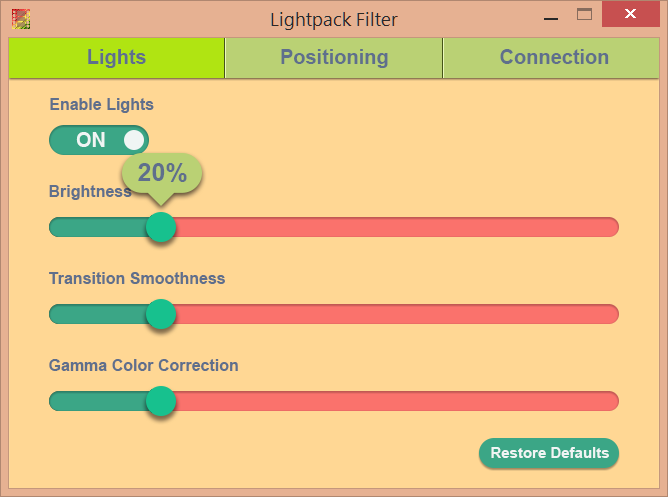
<style>
.page{position:relative;width:668px;height:497px;background:#ffd794}
.page>*{position:absolute;margin:0}
.t1{font:20px "Arial-BoldMT";color:#5f6f8c}
.t2{font:16px "Arial-BoldMT";color:#5f6f8c}
.t3{font:20px "Arial-BoldMT";color:#f0f5f4}
.t4{font:25px "Arial-BoldMT";color:#5f6f8c}
.t5{font:15px "Arial-BoldMT";color:#f0f5f4}
</style>
<div class="page">
<p class="t1" style="left:88px;top:49px;width:58px;height:19px">Lights</p>
<p class="t1" style="left:281px;top:49px;width:107px;height:19px">Positioning</p>
<p class="t1" style="left:500px;top:49px;width:109px;height:15px">Connection</p>
<p class="t2" style="left:50px;top:98px;width:104px;height:15px">Enable Lights</p>
<p class="t3" style="left:76px;top:132px;width:29px;height:15px">ON</p>
<p class="t4" style="left:138px;top:163px;width:49px;height:19px">20%</p>
<p class="t2" style="left:49px;top:185px;width:83px;height:15px">Brightness</p>
<p class="t2" style="left:49px;top:272px;width:176px;height:12px">Transition Smoothness</p>
<p class="t2" style="left:49px;top:359px;width:189px;height:12px">Gamma Color Correction</p>
<p class="t5" style="left:491px;top:447px;width:118px;height:11px">Restore Defaults</p>
</div>
